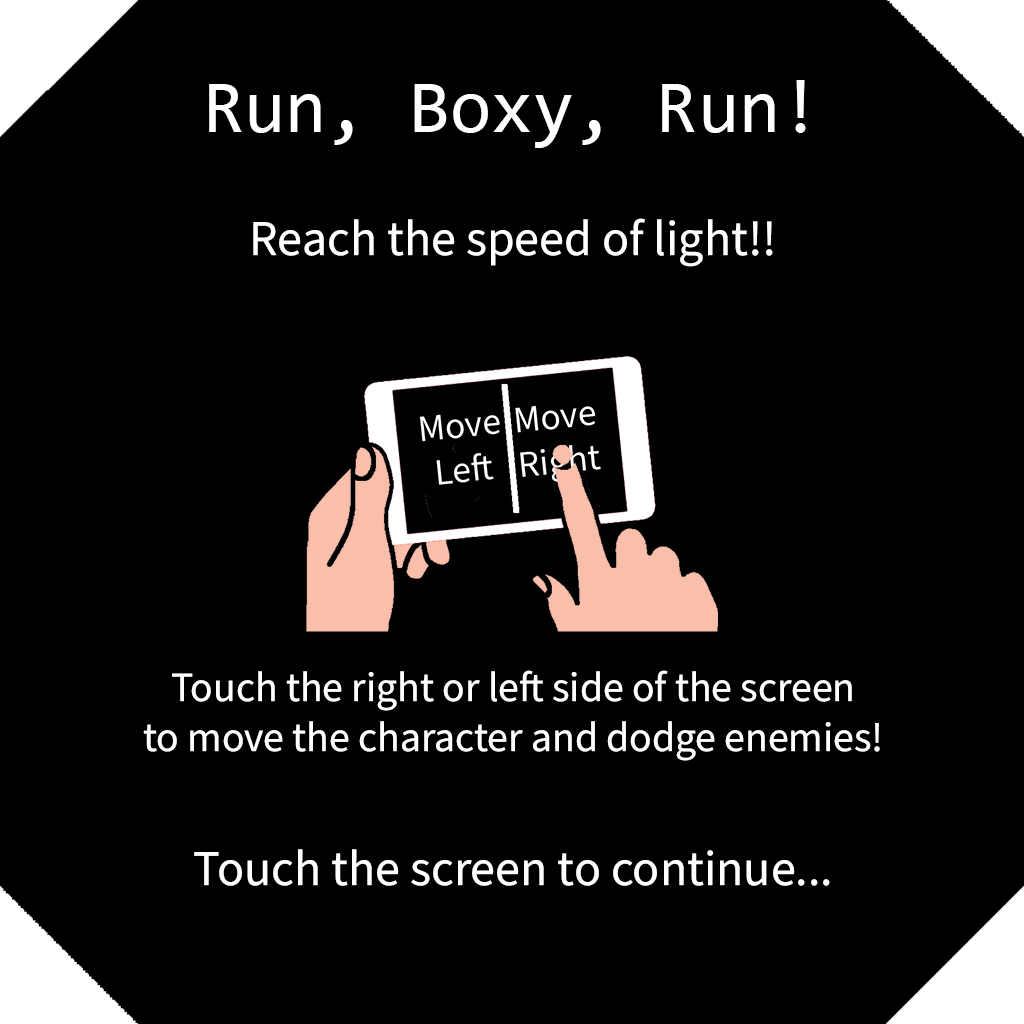
<style>
.page{position:relative;width:1024px;height:1024px;background:#000000}
.page>*{position:absolute;margin:0}
.t1{font:75px "Consolas";color:#ffffff}
.t2{font:50px "SourceSansRoman-Regular";color:#ffffff}
.t3{font:41.7px "SourceSansRoman-Regular";color:#ffffff}
</style>
<div class="page">
<p class="t1" style="left:209px;top:80px;width:597px;height:68px">Run, Boxy, Run!</p>
<p class="t2" style="left:253px;top:218px;width:520px;height:49px">Reach the speed of light!!</p>
<p class="t3" style="left:143px;top:670px;width:737px;height:91px;text-align:center">Touch the right or left side of the screen<br>to move the character and dodge enemies!</p>
<p class="t2" style="left:194px;top:849px;width:636px;height:37px">Touch the screen to continue...</p>
</div>
